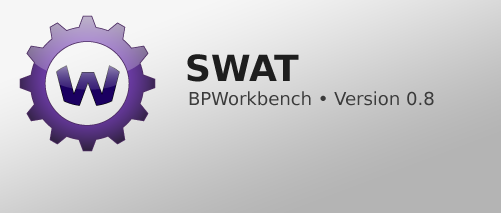
<style>
.page{position:relative;width:501px;height:213px}
.page>*{position:absolute;margin:0}
.t1{font:36px "BitstreamVeraSans-Bold";color:#1e1e1e}
.t2{font:18px "BitstreamVeraSans-Roman";color:#3b3b3b}
</style>
<div class="page">
<p class="t1" style="left:187px;top:54px;width:112px;height:28px">SWAT</p>
<p class="t2" style="left:189px;top:91px;width:245px;height:15px">BPWorkbench • Version 0.8</p>
</div>
